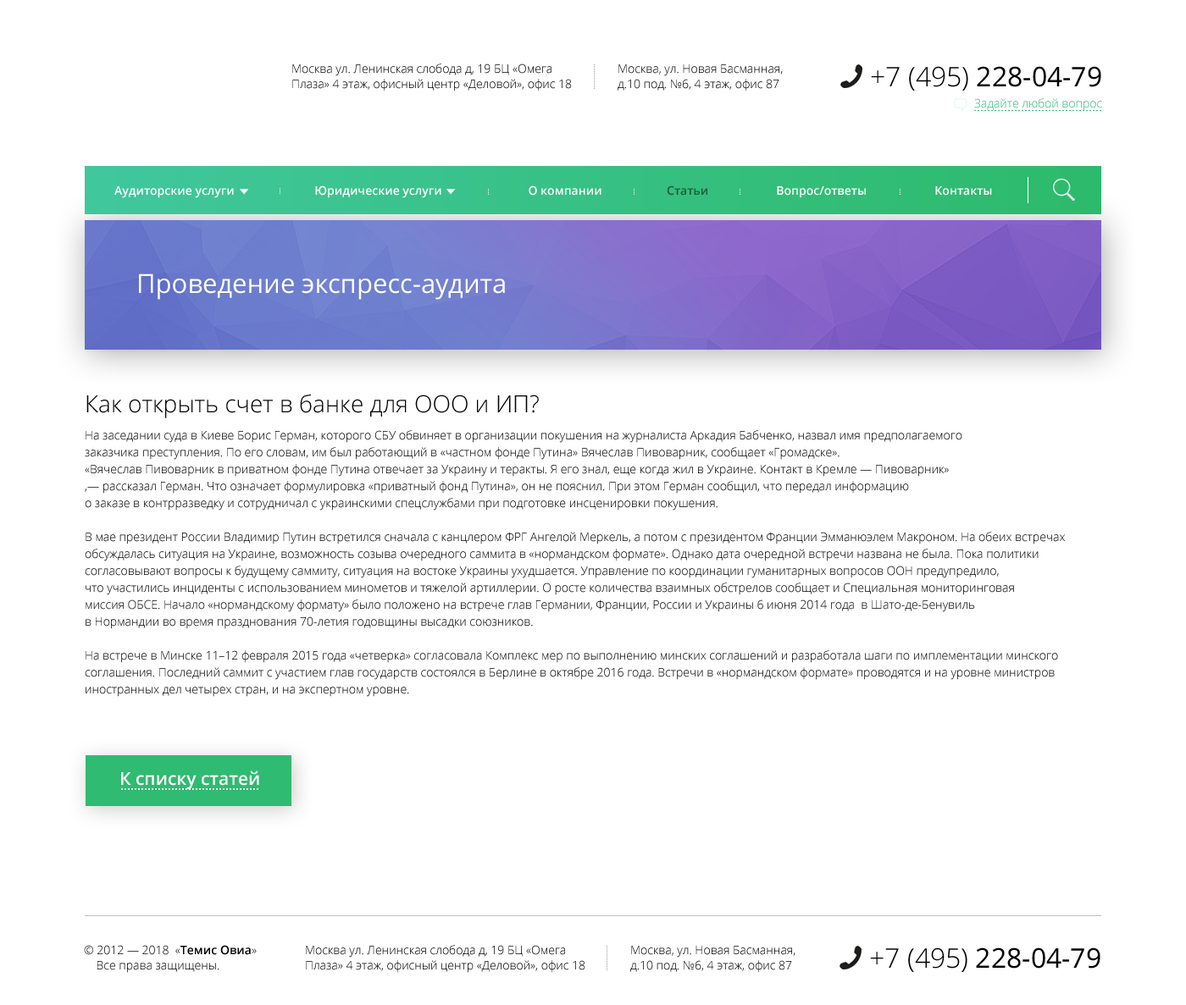
<style>
.page{position:relative;width:1186px;height:1005px;background:#ffffff}
.page>*{position:absolute;margin:0}
.t1{font:11.9px/15.2px "OpenSans-Light";color:#000000}
.t2{font:27.1px "OpenSans";color:#000000}
.t3{font:27.1px "OpenSans-Light";color:#000000}
.t4{font:11.9px "OpenSans-Light";color:#31bd76}
.t5{font:11.9px "OpenSans-Semibold";color:#ffffff}
.t6{font:11.9px "OpenSans-Semibold";color:#1a5c3f}
.t7{font:26.3px "OpenSans";color:#ffffff}
.t8{font:23.7px "OpenSans-Light";color:#000000}
.t9{font:11.9px/16.9px "OpenSans-Light";color:#000000}
.t10{font:17.8px "OpenSans-Semibold";color:#ffffff}
.t11{font:11.9px/15.2px "OpenSans-Semibold";color:#000000}
</style>
<div class="page">
<p class="t1" style="left:292px;top:64px;width:280px;height:27px">Москва ул. Ленинская слобода д, 19 БЦ «Омега <br>Плаза» 4 этаж, офисный центр «Деловой», офис 18</p>
<p class="t1" style="left:618px;top:64px;width:165px;height:27px">Москва, ул. Новая Басманная, <br>д.10 под. №6, 4 этаж, офис 87</p>
<p class="t2" style="left:871px;top:66px;width:230px;height:25px"><span class="t3">+7 (495) </span>228-04-79</p>
<p class="t4" style="left:974px;top:98px;width:128px;height:13px">Задайте любой вопрос</p>
<p class="t5" style="left:114px;top:186px;width:878px;height:12px">Аудиторские услуги                          Юридические услуги                            О компании                   <span class="t6">  Статьи                     </span> Вопрос/ответы                      Контакты</p>
<p class="t7" style="left:139px;top:274px;width:366px;height:26px">Проведение экспресс-аудита</p>
<p class="t8" style="left:86px;top:394px;width:453px;height:24px">Как открыть счет в банке для ООО и ИП?</p>
<p class="t9" style="left:85px;top:430px;width:980px;height:267px">На заседании суда в Киеве Борис Герман, которого СБУ обвиняет в организации покушения на журналиста Аркадия Бабченко, назвал имя предполагаемого <br>заказчика преступления. По его словам, им был работающий в «частном фонде Путина» Вячеслав Пивоварник, сообщает «Громадске».<br>«Вячеслав Пивоварник в приватном фонде Путина отвечает за Украину и теракты. Я его знал, еще когда жил в Украине. Контакт в Кремле — Пивоварник»<br>,— рассказал Герман. Что означает формулировка «приватный фонд Путина», он не пояснил. При этом Герман сообщил, что передал информацию <br>о заказе в контрразведку и сотрудничал с украинскими спецслужбами при подготовке инсценировки покушения.<br><br>В мае президент России Владимир Путин встретился сначала с канцлером ФРГ Ангелой Меркель, а потом с президентом Франции Эмманюэлем Макроном. На обеих встречах обсуждалась ситуация на Украине, возможность созыва очередного саммита в «нормандском формате». Однако дата очередной встречи названа не была. Пока политики согласовывают вопросы к будущему саммиту, ситуация на востоке Украины ухудшается. Управление по координации гуманитарных вопросов ООН предупредило, <br>что участились инциденты с использованием минометов и тяжелой артиллерии. О росте количества взаимных обстрелов сообщает и Специальная мониторинговая <br>миссия ОБСЕ. Начало «нормандскому формату» было положено на встрече глав Германии, Франции, России и Украины 6 июня 2014 года  в Шато-де-Бенувиль <br>в Нормандии во время празднования 70-летия годовщины высадки союзников.<br><br>На встрече в Минске 11–12 февраля 2015 года «четверка» согласовала Комплекс мер по выполнению минских соглашений и разработала шаги по имплементации минского соглашения. Последний саммит с участием глав государств состоялся в Берлине в октябре 2016 года. Встречи в «нормандском формате» проводятся и на уровне министров иностранных дел четырех стран, и на экспертном уровне.</p>
<p class="t10" style="left:121px;top:771px;width:138px;height:18px">К списку статей</p>
<p class="t1" style="left:84px;top:945px;width:173px;height:28px">© 2012 — 2018  «<span class="t11">Темис Овиа</span>» <br>    Все права защищены.</p>
<p class="t1" style="left:306px;top:945px;width:279px;height:28px">Москва ул. Ленинская слобода д, 19 БЦ «Омега <br>Плаза» 4 этаж, офисный центр «Деловой», офис 18</p>
<p class="t1" style="left:630px;top:946px;width:165px;height:27px">Москва, ул. Новая Басманная, <br>д.10 под. №6, 4 этаж, офис 87</p>
<p class="t2" style="left:870px;top:948px;width:230px;height:24px"><span class="t3">+7 (495) </span>228-04-79</p>
</div>
